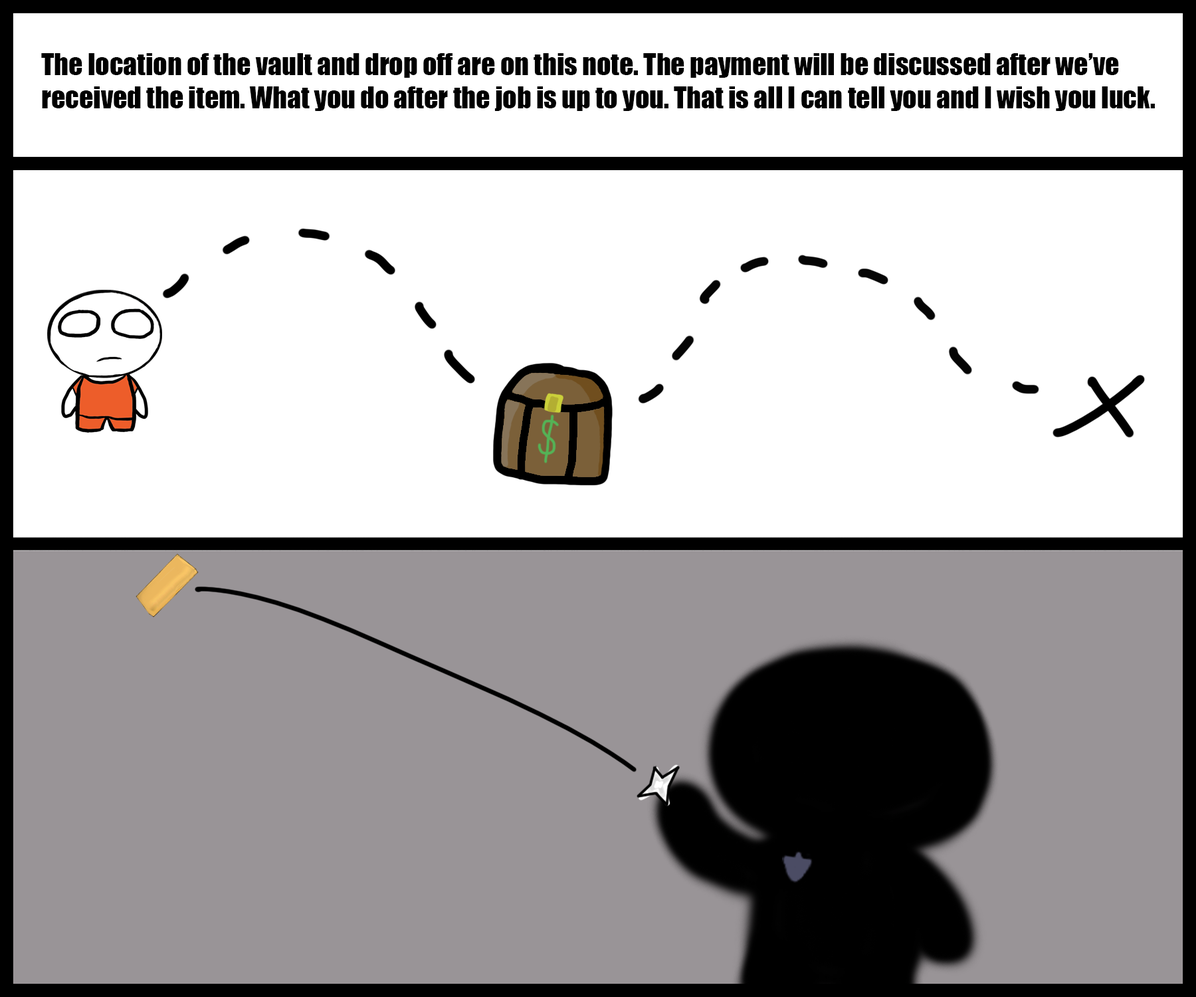
<style>
.page{position:relative;width:1196px;height:997px;background:#ffffff}
.page>*{position:absolute;margin:0}
.t1{font:27.7px "Impact";color:#000000}
</style>
<div class="page">
<p class="t1" style="left:41px;top:53px;width:1114px;height:58px">The location of the vault and drop off are on this note. The payment will be discussed after we’ve<br>received the item. What you do after the job is up to you. That is all I can tell you and I wish you luck.</p>
</div>
